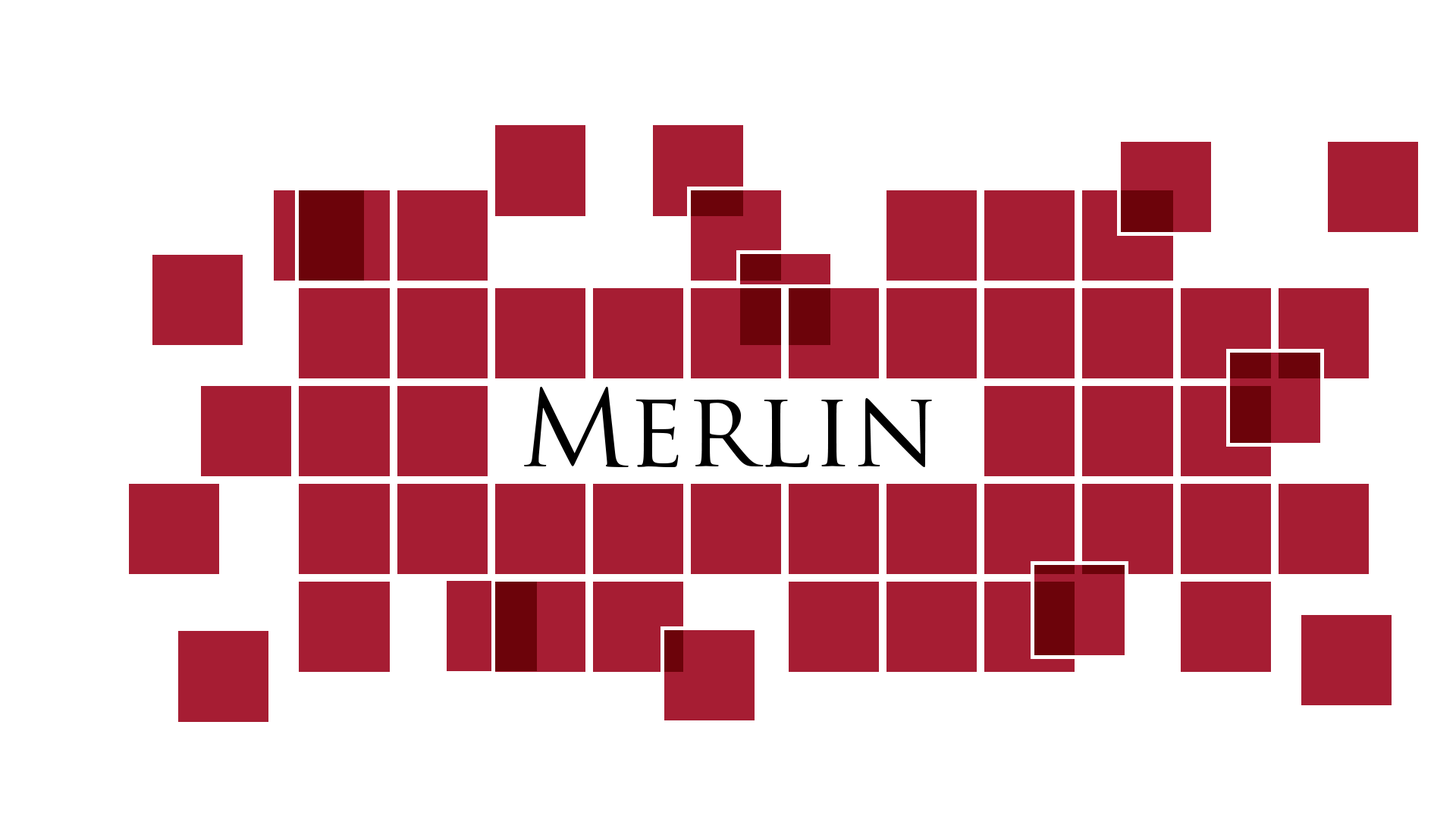
<style>
.page{position:relative;width:1456px;height:819px;background:#ffffff}
.page>*{position:absolute;margin:0}
.t1{font:104.5px "TrajanPro-Regular";color:#000000}
</style>
<div class="page">
<p class="t1" style="left:524px;top:387px;width:408px;height:80px">Merlin</p>
</div>
